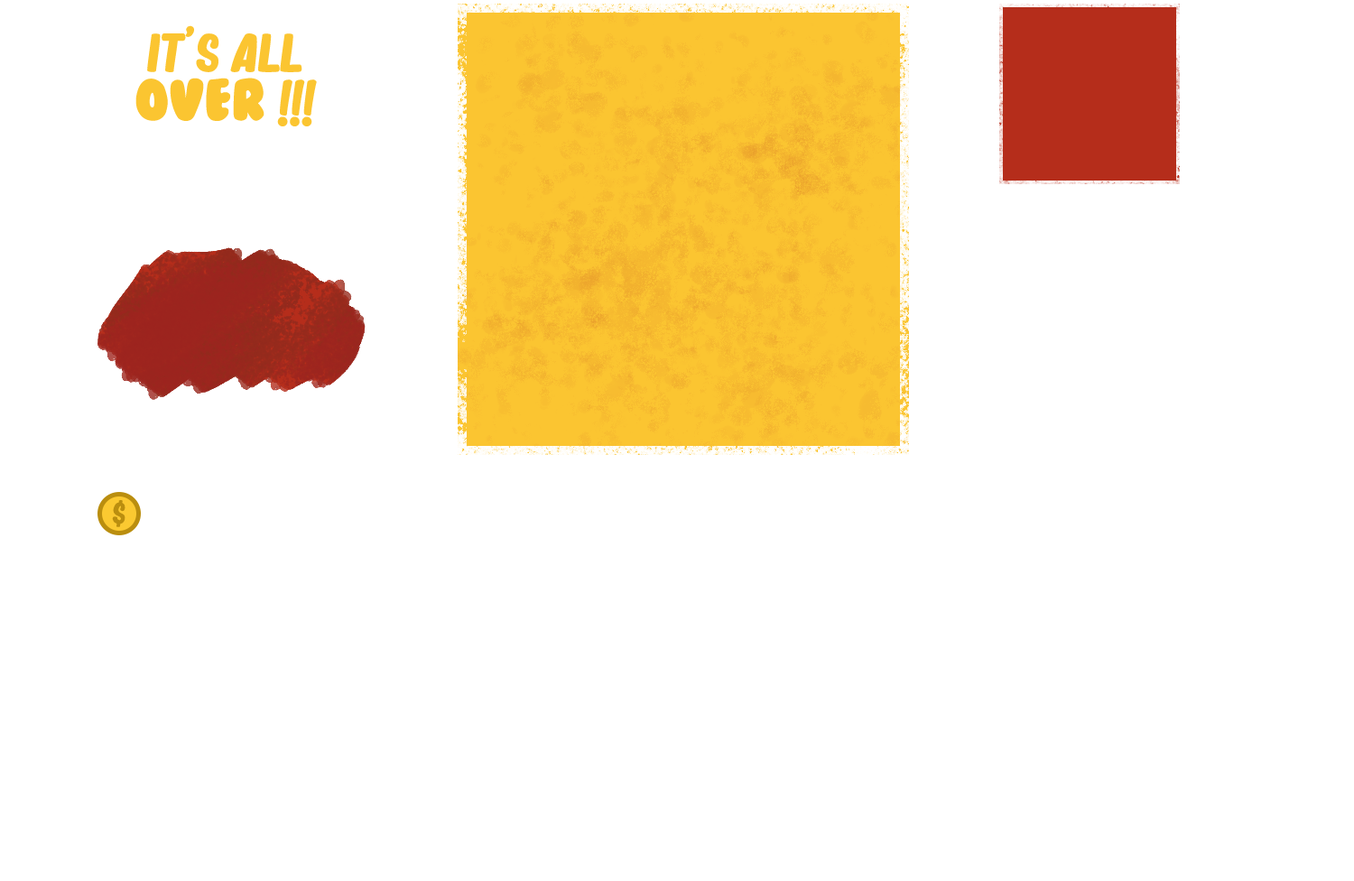
<style>
.page{position:relative;width:1354px;height:881px;background:#ffffff}
.page>*{position:absolute;margin:0}
.t1{font:54.1px/48.7px "MagicDreams";color:#fbc531;text-transform:uppercase}
.t2{font:54.1px/48.7px "BubbleGum";color:#fbc531;text-transform:uppercase}
.t3{font:29.8px "MagicDreams";letter-spacing:0.08em;color:#ba8e0f;text-transform:uppercase}
</style>
<div class="page">
<p class="t1" style="left:135px;top:25px;width:182px;height:101px;text-align:center">it's all<br><span class="t2">over</span> !!!</p>
<p class="t3" style="left:112px;top:500px;width:13px;height:27px">$</p>
</div>
